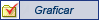
<style>
.page{position:relative;width:99px;height:20px;background:#cfd3df}
.page>*{position:absolute;margin:0}
.t1{font:11px "Arial-ItalicMT";color:#003366}
</style>
<div class="page">
<p class="t1" style="left:35px;top:6px;width:40px;height:8px">Graficar</p>
</div>
